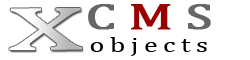
<style>
.page{position:relative;width:250px;height:60px;background:#ffffff}
.page>*{position:absolute;margin:0}
.t1{font:37.1px "CambriaMath";letter-spacing:0.2em;color:#666666;font-weight:bold;scale:1.46 1}
.t2{font:37.1px "CambriaMath";letter-spacing:0.2em;color:#990000;font-weight:bold;scale:1.46 1}
.t3{font:21.3px "CambriaMath";letter-spacing:0.2em;color:#000000;scale:1.31 1}
</style>
<div class="page">
<p class="t1" style="left:88px;top:4px;width:123px;height:26px">C<span class="t2">M</span>S</p>
<p class="t3" style="left:90px;top:37px;width:117px;height:19px">objects</p>
</div>
